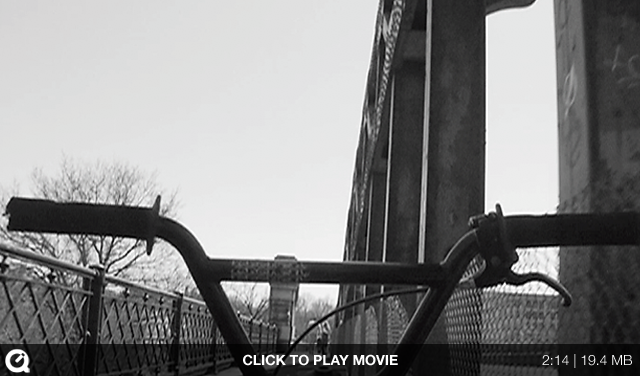
<style>
.page{position:relative;width:640px;height:376px}
.page>*{position:absolute;margin:0}
.t1{font:14px "HelveticaNeue-Bold";color:#ffffff}
.t2{font:14px "HelveticaNeue-Light";color:#ffffff}
</style>
<div class="page">
<p class="t1" style="left:243px;top:354px;width:155px;height:12px">CLICK TO PLAY MOVIE</p>
<p class="t2" style="left:542px;top:354px;width:90px;height:14px">2:14 | 19.4 MB</p>
</div>
